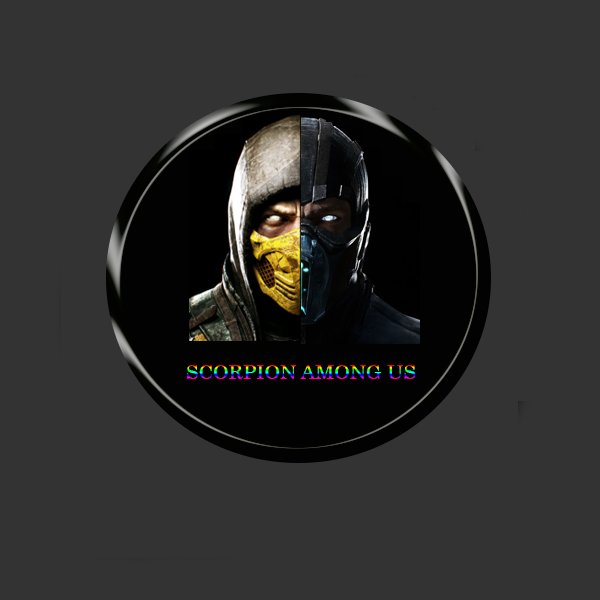
<style>
.page{position:relative;width:600px;height:600px;background:#333333}
.page>*{position:absolute;margin:0}
.t1{font:20px "Century";text-transform:uppercase}
</style>
<div class="page">
<p class="t1" style="left:187px;top:365px;width:229px;height:14px">Scorpion Among Us</p>
</div>
